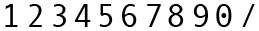
<style>
.page{position:relative;width:259px;height:31px;background:#ffffff}
.page>*{position:absolute;margin:0}
.t1{font:33.3px "AndaleMono";letter-spacing:0.14em;color:#000000}
</style>
<div class="page">
<p class="t1" style="left:5px;top:4px;width:61px;height:23px">123</p>
<p class="t1" style="left:75px;top:4px;width:16px;height:23px">4</p>
<p class="t1" style="left:99px;top:4px;width:14px;height:23px">5</p>
<p class="t1" style="left:122px;top:4px;width:39px;height:23px">67</p>
<p class="t1" style="left:168px;top:4px;width:40px;height:23px">89</p>
<p class="t1" style="left:216px;top:4px;width:39px;height:23px">0/</p>
</div>
